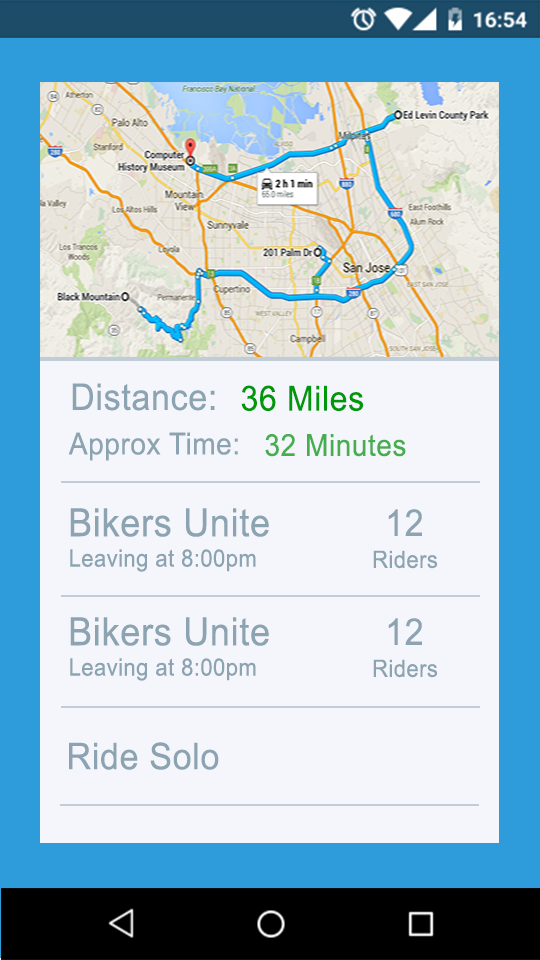
<style>
.page{position:relative;width:540px;height:960px;background:#f5f6fc}
.page>*{position:absolute;margin:0}
.t1{font:36.7px "ArialMT";letter-spacing:0.02em;color:#8ca3b1;scale:0.93 1}
.t2{font:34.6px "ArialMT";letter-spacing:0.02em;color:#00980b;scale:0.93 1}
.t3{font:30.2px "ArialMT";letter-spacing:0.02em;color:#8ca3b1;scale:0.93 1}
.t4{font:30.2px "ArialMT";letter-spacing:0.02em;color:#46ae4e;scale:0.93 1}
.t5{font:38.9px "ArialMT";letter-spacing:0.02em;color:#8ca3b1;scale:0.93 1}
.t6{font:23.8px "ArialMT";letter-spacing:0.02em;color:#8ca3b1;scale:0.93 1}
</style>
<div class="page">
<p class="t1" style="left:72px;top:383px;width:143px;height:28px">Distance:</p>
<p class="t2" style="left:241px;top:385px;width:122px;height:26px">36 Miles</p>
<p class="t3" style="left:68px;top:432px;width:170px;height:29px">Approx Time:</p>
<p class="t4" style="left:265px;top:434px;width:141px;height:23px">32 Minutes</p>
<p class="t5" style="left:70px;top:508px;width:199px;height:29px">Bikers Unite</p>
<p class="t1" style="left:388px;top:509px;width:34px;height:27px">12</p>
<p class="t6" style="left:70px;top:549px;width:186px;height:23px">Leaving at 8:00pm</p>
<p class="t6" style="left:373px;top:550px;width:65px;height:19px">Riders</p>
<p class="t5" style="left:70px;top:617px;width:199px;height:29px">Bikers Unite</p>
<p class="t1" style="left:388px;top:618px;width:34px;height:27px">12</p>
<p class="t6" style="left:70px;top:658px;width:186px;height:23px">Leaving at 8:00pm</p>
<p class="t6" style="left:373px;top:659px;width:65px;height:19px">Riders</p>
<p class="t1" style="left:69px;top:742px;width:150px;height:28px">Ride Solo</p>
</div>
